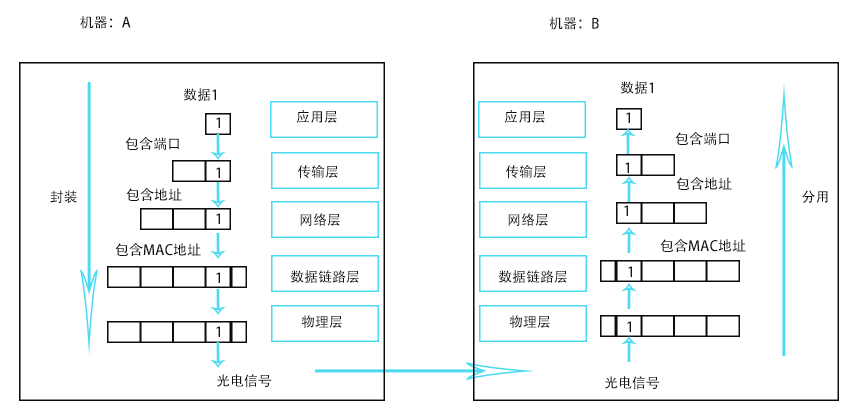
<style>
.page{position:relative;width:850px;height:418px;background:#ffffff}
.page>*{position:absolute;margin:0}
.t1{font:14px "AdobeHeitiStd-Regular";color:#141212}
</style>
<div class="page">
<p class="t1" style="left:80px;top:15px;width:51px;height:14px">机器：A</p>
<p class="t1" style="left:549px;top:16px;width:50px;height:14px">机器：B</p>
<p class="t1" style="left:183px;top:88px;width:33px;height:13px">数据1</p>
<p class="t1" style="left:620px;top:81px;width:33px;height:13px">数据1</p>
<p class="t1" style="left:296px;top:110px;width:41px;height:13px">应用层</p>
<p class="t1" style="left:504px;top:110px;width:41px;height:13px">应用层</p>
<p class="t1" style="left:626px;top:112px;width:4px;height:11px">1</p>
<p class="t1" style="left:216px;top:117px;width:4px;height:11px">1</p>
<p class="t1" style="left:125px;top:137px;width:54px;height:14px">包含端口</p>
<p class="t1" style="left:675px;top:132px;width:54px;height:14px">包含端口</p>
<p class="t1" style="left:216px;top:167px;width:4px;height:11px">1</p>
<p class="t1" style="left:297px;top:165px;width:41px;height:14px">传输层</p>
<p class="t1" style="left:505px;top:165px;width:41px;height:14px">传输层</p>
<p class="t1" style="left:625px;top:162px;width:4px;height:11px">1</p>
<p class="t1" style="left:676px;top:177px;width:56px;height:13px">包含地址</p>
<p class="t1" style="left:50px;top:190px;width:27px;height:14px">封装</p>
<p class="t1" style="left:126px;top:188px;width:56px;height:13px">包含地址</p>
<p class="t1" style="left:802px;top:190px;width:26px;height:13px">分用</p>
<p class="t1" style="left:624px;top:205px;width:4px;height:11px">1</p>
<p class="t1" style="left:216px;top:213px;width:4px;height:11px">1</p>
<p class="t1" style="left:300px;top:213px;width:40px;height:13px">网络层</p>
<p class="t1" style="left:508px;top:213px;width:40px;height:13px">网络层</p>
<p class="t1" style="left:115px;top:243px;width:86px;height:13px">包含MAC地址</p>
<p class="t1" style="left:660px;top:239px;width:86px;height:13px">包含MAC地址</p>
<p class="t1" style="left:290px;top:270px;width:69px;height:13px">数据链路层</p>
<p class="t1" style="left:498px;top:270px;width:69px;height:13px">数据链路层</p>
<p class="t1" style="left:628px;top:266px;width:4px;height:11px">1</p>
<p class="t1" style="left:216px;top:272px;width:4px;height:11px">1</p>
<p class="t1" style="left:301px;top:315px;width:41px;height:13px">物理层</p>
<p class="t1" style="left:509px;top:315px;width:41px;height:13px">物理层</p>
<p class="t1" style="left:216px;top:326px;width:4px;height:11px">1</p>
<p class="t1" style="left:627px;top:321px;width:4px;height:11px">1</p>
<p class="t1" style="left:217px;top:374px;width:55px;height:14px">光电信号</p>
<p class="t1" style="left:605px;top:376px;width:55px;height:14px">光电信号</p>
</div>
